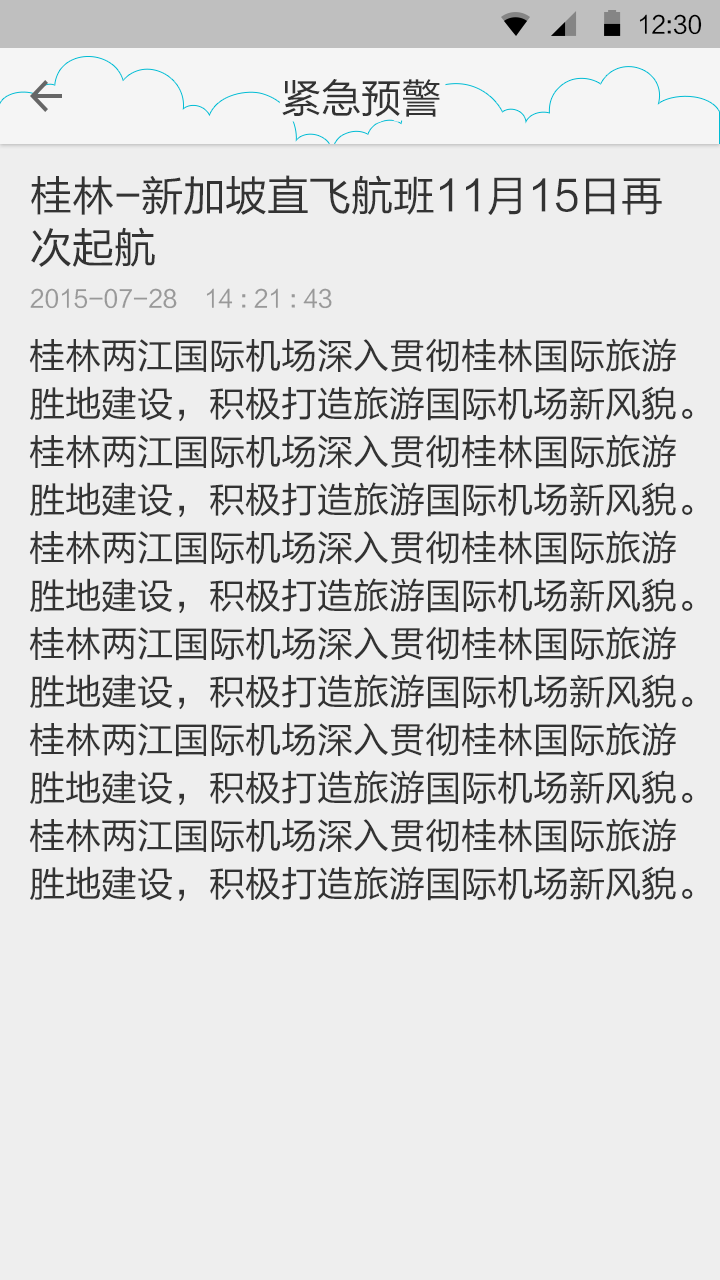
<style>
.page{position:relative;width:720px;height:1280px;background:#eeeeee}
.page>*{position:absolute;margin:0}
.t1{font:23.9px "FZLTHJW--GB1-0";color:#000000}
.t2{font:40px "FZLTHJW--GB1-0";color:#333333}
.t3{font:42px/52px "FZLTHJW--GB1-0";color:#333333}
.t4{font:24px "FZLTHJW--GB1-0";color:#999999}
.t5{font:36px/48px "FZLTHJW--GB1-0";color:#333333}
</style>
<div class="page">
<p class="t1" style="left:639px;top:14px;width:63px;height:21px">12:30</p>
<p class="t2" style="left:282px;top:79px;width:158px;height:38px">紧急预警</p>
<p class="t3" style="left:31px;top:175px;width:631px;height:92px">桂林-新加坡直飞航班11月15日再<br>次起航</p>
<p class="t4" style="left:30px;top:288px;width:302px;height:21px">2015-07-28    14 : 21 : 43</p>
<p class="t5" style="left:29px;top:338px;width:664px;height:564px">桂林两江国际机场深入贯彻桂林国际旅游<br>胜地建设，积极打造旅游国际机场新风貌。<br>桂林两江国际机场深入贯彻桂林国际旅游<br>胜地建设，积极打造旅游国际机场新风貌。<br>桂林两江国际机场深入贯彻桂林国际旅游<br>胜地建设，积极打造旅游国际机场新风貌。<br>桂林两江国际机场深入贯彻桂林国际旅游<br>胜地建设，积极打造旅游国际机场新风貌。<br>桂林两江国际机场深入贯彻桂林国际旅游<br>胜地建设，积极打造旅游国际机场新风貌。<br>桂林两江国际机场深入贯彻桂林国际旅游<br>胜地建设，积极打造旅游国际机场新风貌。</p>
</div>
